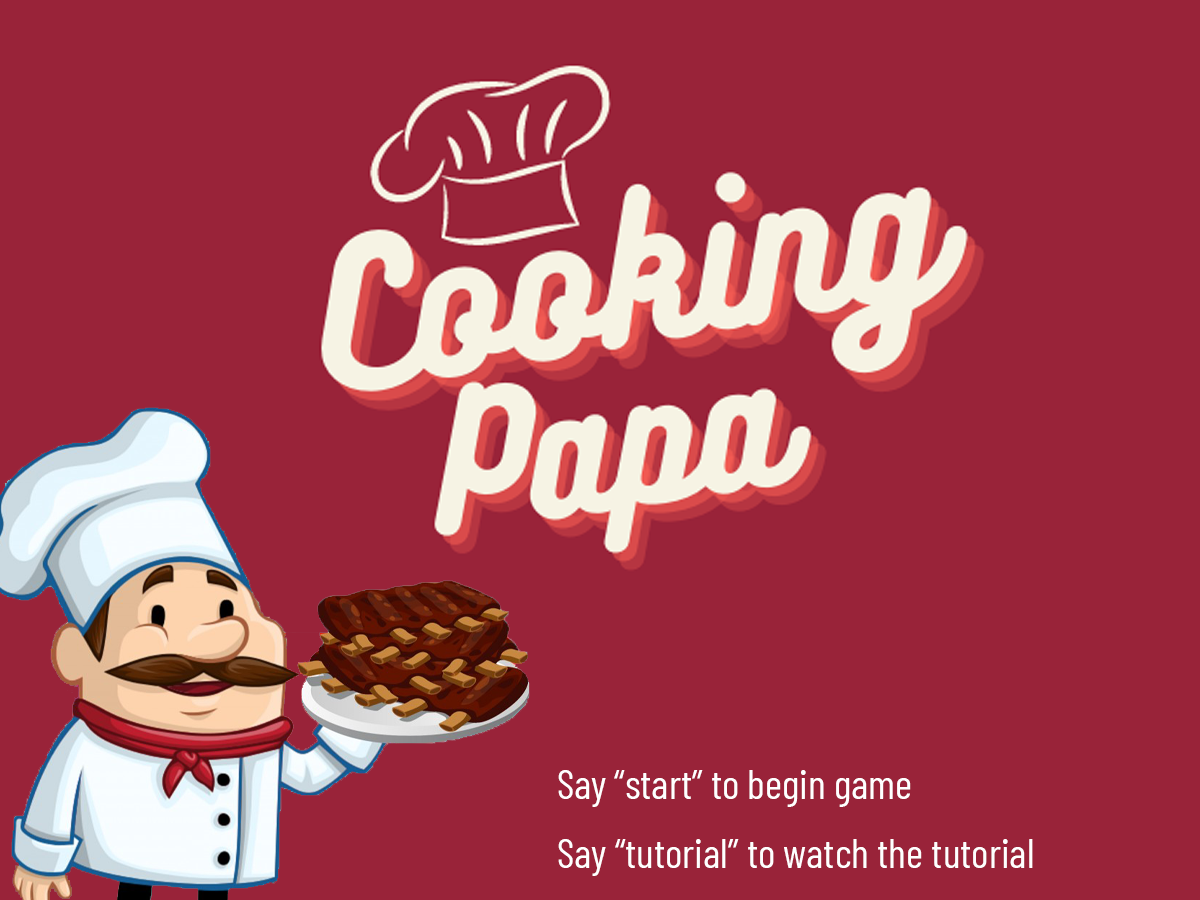
<style>
.page{position:relative;width:1200px;height:900px;background:#992339}
.page>*{position:absolute;margin:0}
.t1{font:41.7px "BarlowCondensed-Regular";color:#ffffff}
</style>
<div class="page">
<p class="t1" style="left:558px;top:770px;width:353px;height:37px">Say “start” to begin game</p>
<p class="t1" style="left:558px;top:839px;width:475px;height:37px">Say “tutorial” to watch the tutorial</p>
</div>
